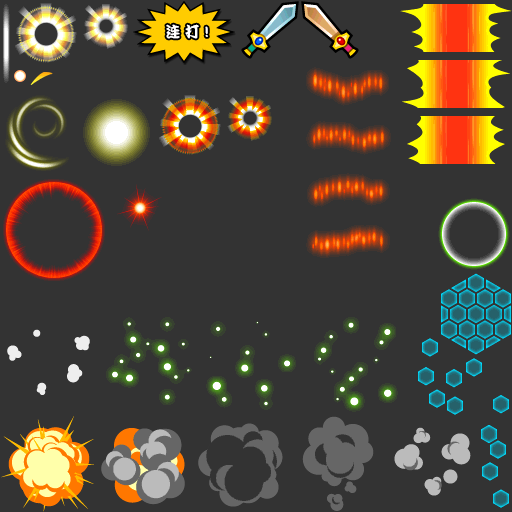
<style>
.page{position:relative;width:512px;height:512px;background:#333333}
.page>*{position:absolute;margin:0}
.t1{font:15px "DFPKanTingLiuW9";color:#ffffff;scale:0.96 1}
</style>
<div class="page">
<p class="t1" style="left:166px;top:24px;width:42px;height:15px">连 打 !</p>
</div>
